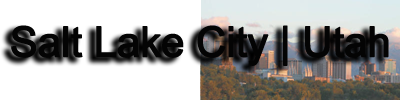
<style>
.page{position:relative;width:400px;height:100px;background:#ffffff}
.page>*{position:absolute;margin:0}
.t1{font:41.7px "ArialMT";letter-spacing:-0.025em;color:#040404;font-weight:bold}
</style>
<div class="page">
<p class="t1" style="left:11px;top:25px;width:378px;height:41px">Salt Lake City | Utah</p>
</div>
